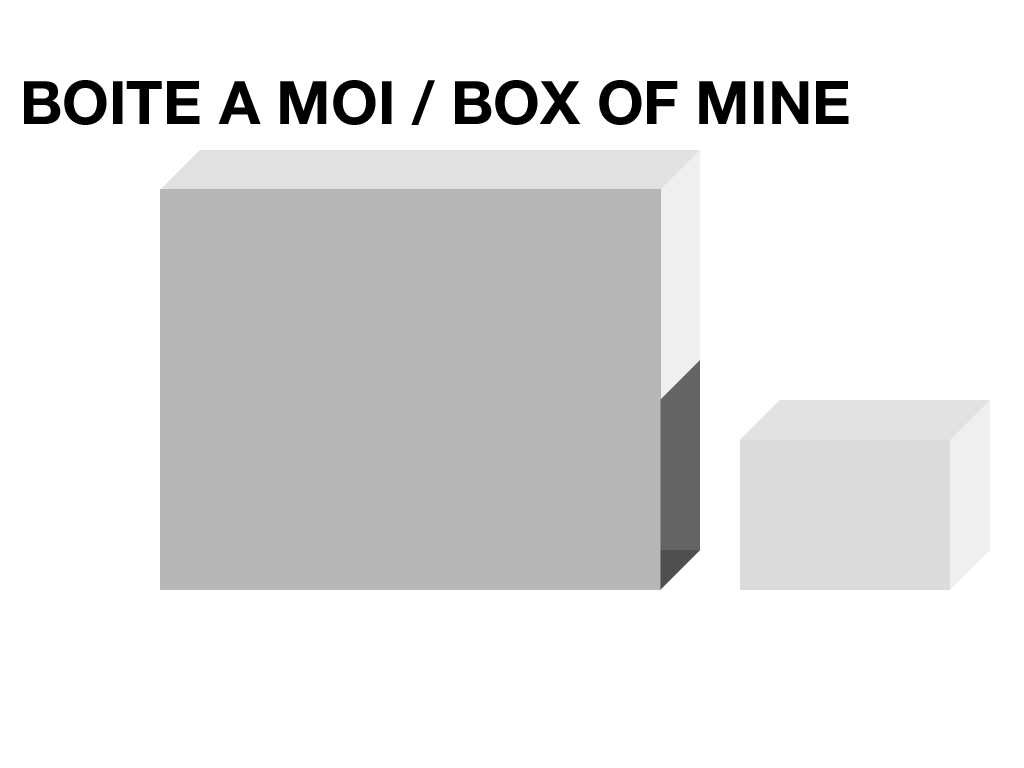
<style>
.page{position:relative;width:1024px;height:768px;background:#ffffff}
.page>*{position:absolute;margin:0}
.t1{font:60px "HelveticaNeue-Bold";color:#000000}
</style>
<div class="page">
<p class="t1" style="left:24px;top:80px;width:825px;height:45px">BOITE A MOI / BOX OF MINE</p>
</div>
